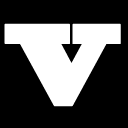
<style>
.page{position:relative;width:128px;height:128px;background:#000000}
.page>*{position:absolute;margin:0}
.t1{font:110.2px "BlackoakStd";color:#ffffff;scale:0.59 1}
</style>
<div class="page">
<p class="t1" style="left:4px;top:23px;width:117px;height:84px">V</p>
</div>
